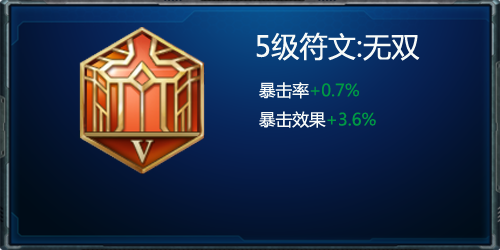
<style>
.page{position:relative;width:500px;height:250px}
.page>*{position:absolute;margin:0}
.t1{font:28.3px "MicrosoftYaHei";color:#f7faf8}
.t2{font:16.7px "MicrosoftYaHei";color:#f7faf8}
.t3{font:16.7px "MicrosoftYaHei";color:#009944}
</style>
<div class="page">
<p class="t1" style="left:256px;top:32px;width:164px;height:96px;text-align:center">5级符文:无双<br><span class="t2">  暴击率</span><span class="t3">+0.7%<br></span><span class="t2">  暴击效果</span><span class="t3">+3.6%</span></p>
</div>
